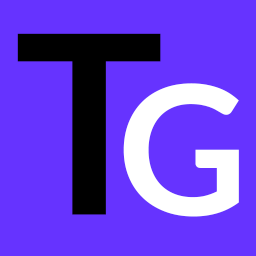
<style>
.page{position:relative;width:256px;height:256px;background:#6633ff}
.page>*{position:absolute;margin:0}
.t1{font:250px "Lato-Bold";color:#000000}
.t2{font:180px "Lato-Bold";color:#ffffff}
</style>
<div class="page">
<p class="t1" style="left:17px;top:33px;width:144px;height:182px">T</p>
<p class="t2" style="left:123px;top:83px;width:116px;height:134px">G</p>
</div>
